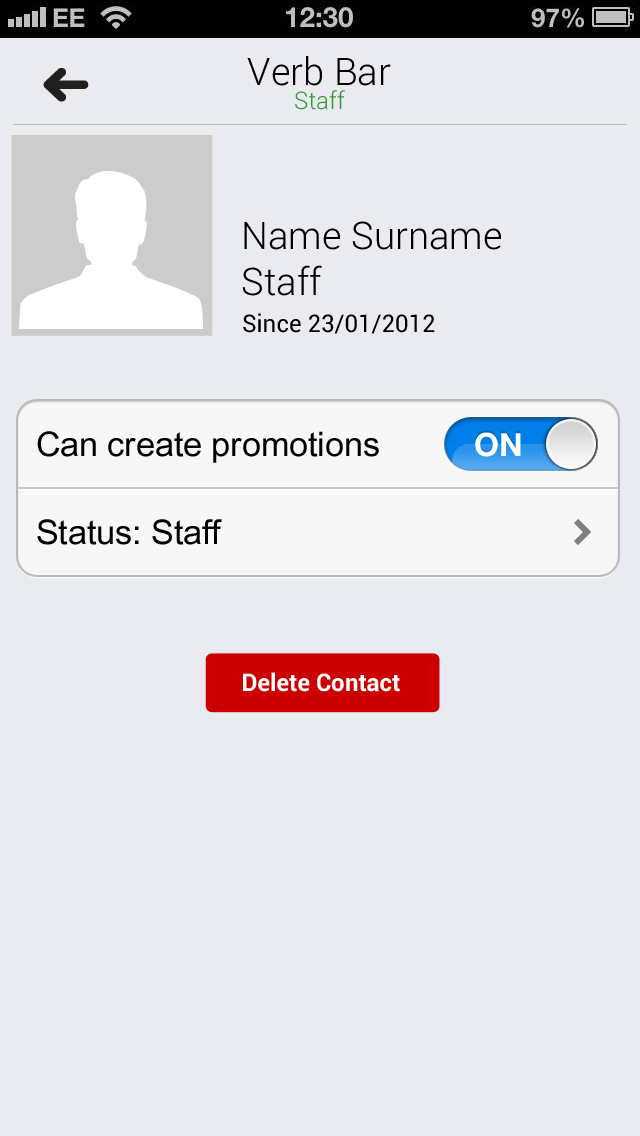
<style>
.page{position:relative;width:640px;height:1136px;background:#e9ebf0}
.page>*{position:absolute;margin:0}
.t1{font:38px "Roboto-Light";color:#000000}
.t2{font:24px "Roboto-Light";color:#339933}
.t3{font:24px "Roboto-Regular";color:#000000}
.t4{font:34px "ArialUnicodeMS";color:#000000}
.t5{font:32px "HelveticaNeue-Bold";color:#ffffff}
.t6{font:24px "Roboto-Bold";color:#ffffff}
</style>
<div class="page">
<p class="t1" style="left:247px;top:56px;width:144px;height:30px">Verb Bar</p>
<p class="t2" style="left:295px;top:90px;width:50px;height:20px">Staff</p>
<p class="t1" style="left:242px;top:221px;width:259px;height:75px">Name Surname<br>Staff</p>
<p class="t3" style="left:243px;top:313px;width:192px;height:21px">Since 23/01/2012</p>
<p class="t4" style="left:37px;top:431px;width:342px;height:32px">Can create promotions</p>
<p class="t5" style="left:475px;top:432px;width:46px;height:25px">ON</p>
<p class="t4" style="left:37px;top:519px;width:185px;height:26px">Status: Staff</p>
<p class="t6" style="left:243px;top:672px;width:157px;height:20px">Delete Contact</p>
</div>
